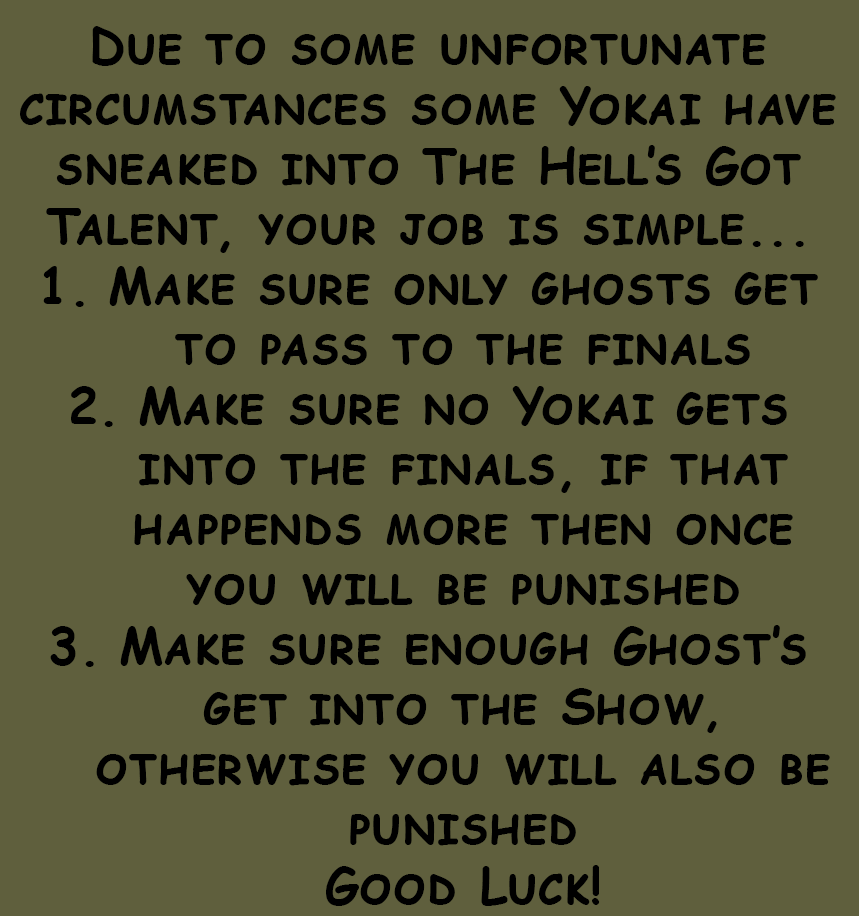
<style>
.page{position:relative;width:859px;height:916px;background:#5f5f3d}
.page>*{position:absolute;margin:0}
.t1{font:50px "ComicSansMS-Bold";color:#000000;font-variant:small-caps}
</style>
<div class="page">
<p class="t1" style="left:20px;top:26px;width:816px;height:880px;text-align:center">Due to some unfortunate circumstances some Yokai have sneaked into The Hell’s Got Talent, your job is simple...<br>Make sure only ghosts get to pass to the finals<br>Make sure no Yokai gets into the finals, if that happends more then once you will be punished<br>Make sure enough Ghost’s get into the Show, otherwise you will also be punished<br>Good Luck!</p>
</div>
